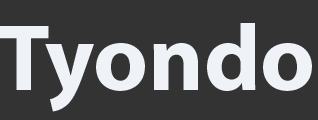
<style>
.page{position:relative;width:318px;height:120px;background:#333333}
.page>*{position:absolute;margin:0}
.t1{font:95px "MyriadPro-Bold";color:#eff2f7}
</style>
<div class="page">
<p class="t1" style="left:0px;top:23px;width:312px;height:89px">Tyondo</p>
</div>
